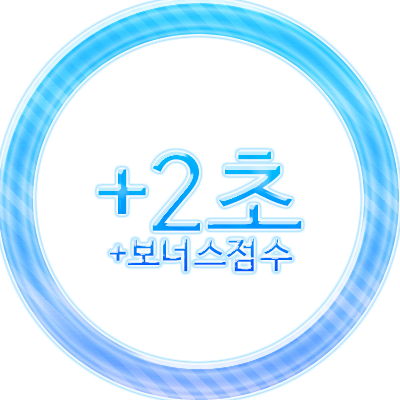
<style>
.page{position:relative;width:400px;height:400px;background:#ffffff}
.page>*{position:absolute;margin:0}
.t1{font:105px "HCRDotum";letter-spacing:-0.05em;font-weight:bold}
.t2{font:35px "HCRDotum";letter-spacing:-0.05em;font-weight:bold}
</style>
<div class="page">
<p class="t1" style="left:98px;top:151px;width:204px;height:80px">+2초</p>
<p class="t2" style="left:110px;top:238px;width:182px;height:34px">+보너스점수</p>
</div>
